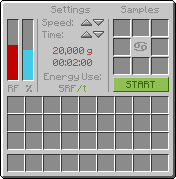
<style>
.page{position:relative;width:176px;height:179px;background:#8b8b8b}
.page>*{position:absolute;margin:0}
.t1{font:8px "Minecraftia-Regular";color:#8b8b8b}
.t2{font:8px "Minecraftia-Regular";color:#b24747}
.t3{font:8px/12px "Minecraftia-Regular";color:#8b8b8b}
.t4{font:8px/12px "Minecraftia-Regular";color:#6fa828}
.t5{font:8px "Minecraftia-Regular";color:#8b8b8b;font-weight:bold}
.t6{font:8px "Minecraftia-Regular";color:#376800}
</style>
<div class="page">
<p class="t1" style="left:51px;top:6px;width:39px;height:8px">Settings</p>
<p class="t1" style="left:121px;top:6px;width:38px;height:8px">Samples</p>
<p class="t1" style="left:42px;top:19px;width:31px;height:8px">Speed:</p>
<p class="t1" style="left:42px;top:31px;width:21px;height:7px">Time:</p>
<p class="t2" style="left:53px;top:47px;width:39px;height:8px">20,000 g</p>
<p class="t2" style="left:53px;top:59px;width:39px;height:7px">00:02:00</p>
<p class="t3" style="left:44px;top:73px;width:57px;height:19px;text-align:center">Energy Use: <br><span class="t4">5RF/t</span></p>
<p class="t1" style="left:8px;top:85px;width:11px;height:7px">RF</p>
<p class="t5" style="left:26px;top:85px;width:6px;height:7px">%</p>
<p class="t6" style="left:126px;top:81px;width:29px;height:7px">START</p>
</div>
